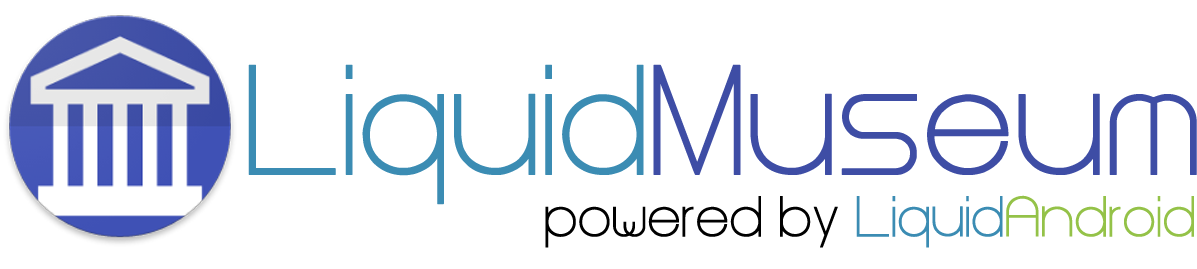
<style>
.page{position:relative;width:1197px;height:269px;background:#ffffff}
.page>*{position:absolute;margin:0}
.t1{font:130px "Steiner";color:#3b8cb3;font-weight:bold}
.t2{font:130px "Steiner";color:#3e4da5;font-weight:bold}
.t3{font:48px "Steiner";color:#000000;font-weight:bold}
.t4{font:48px "Steiner";color:#3b8cb3;font-weight:bold}
.t5{font:48px "Steiner";color:#94c248;font-weight:bold}
</style>
<div class="page">
<p class="t1" style="left:248px;top:64px;width:949px;height:141px">Liquid<span class="t2">Museum</span></p>
<p class="t3" style="left:545px;top:195px;width:649px;height:53px">powered by <span class="t4">Liquid</span><span class="t5">Android</span></p>
</div>
